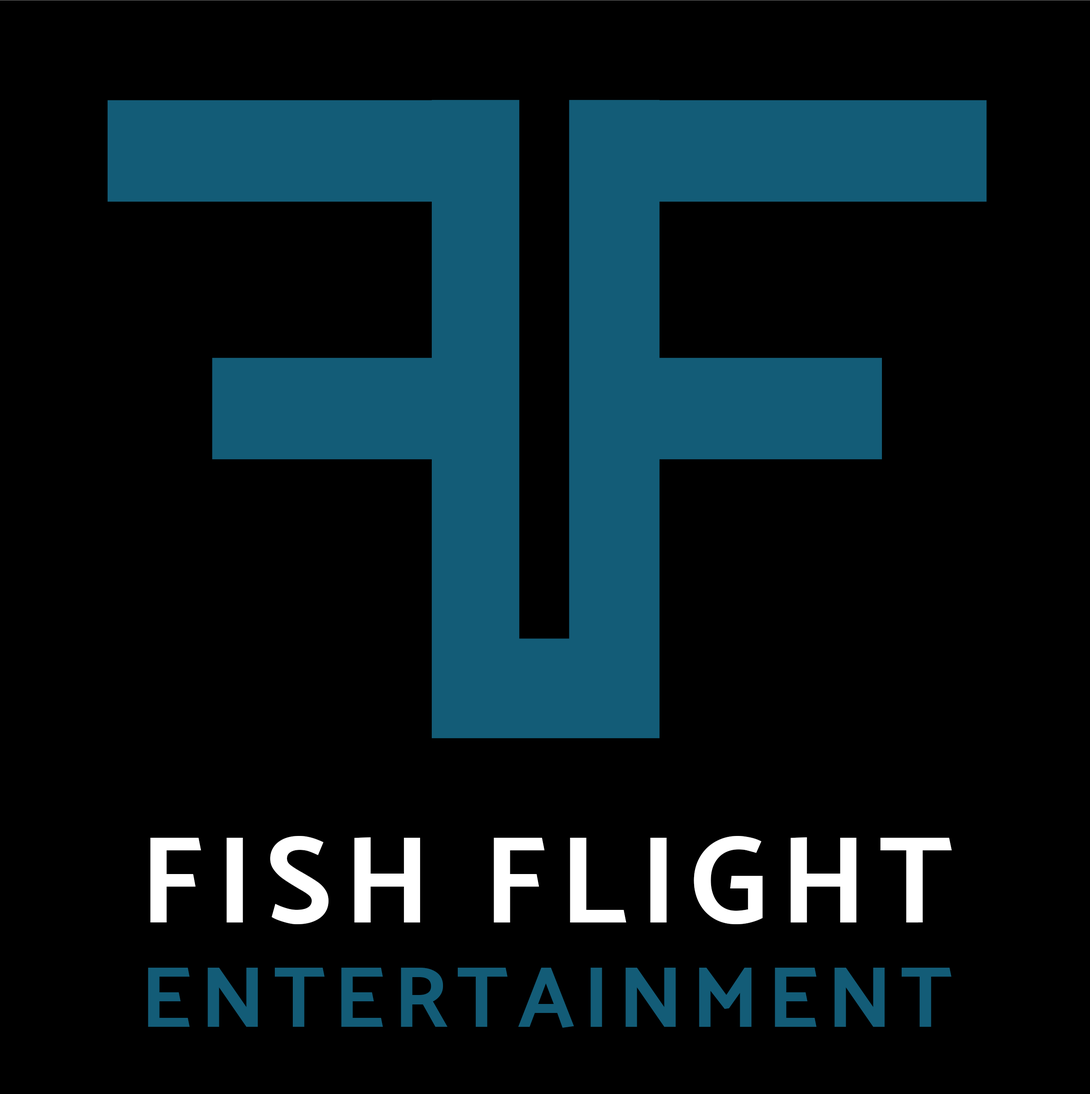
<style>
.page{position:relative;width:1090px;height:1094px;background:#000000}
.page>*{position:absolute;margin:0}
.t1{font:87.2px "MoskBold700";letter-spacing:0.1em;color:#135c77}
.t2{font:124.5px "MoskBold700";letter-spacing:0.1em;color:#ffffff}
</style>
<div class="page">
<p class="t1" style="left:148px;top:836px;width:803px;height:192px;text-align:center"><span class="t2">FISH FLIGHT<br></span>ENTERTAINMENT</p>
</div>
